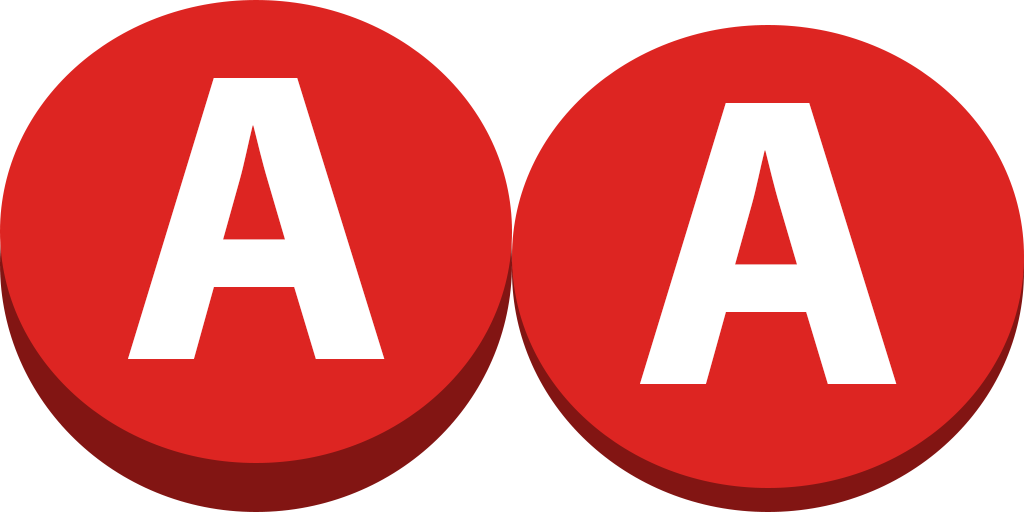
<style>
.page{position:relative;width:1024px;height:512px;background:#dd2522}
.page>*{position:absolute;margin:0}
.t1{font:416.7px "MyriadPro-Bold";color:#ffffff}
</style>
<div class="page">
<p class="t1" style="left:128px;top:78px;width:257px;height:281px">A</p>
<p class="t1" style="left:640px;top:103px;width:257px;height:281px">A</p>
</div>
